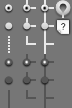
<style>
.page{position:relative;width:72px;height:108px;background:#767676}
.page>*{position:absolute;margin:0}
.t1{font:9px "ArialMT"}
</style>
<div class="page">
<p class="t1" style="left:61px;top:23px;width:5px;height:7px">?</p>
</div>
